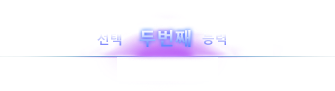
<style>
.page{position:relative;width:335px;height:91px;background:#ffffff}
.page>*{position:absolute;margin:0}
.t1{font:18px "MalgunGothicBold"}
.t2{font:13px "MalgunGothicBold"}
</style>
<div class="page">
<p class="t1" style="left:139px;top:30px;width:52px;height:17px">두번째</p>
<p class="t2" style="left:97px;top:33px;width:25px;height:13px">선택</p>
<p class="t2" style="left:202px;top:32px;width:24px;height:13px">능력</p>
</div>
